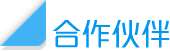
<style>
.page{position:relative;width:170px;height:51px;background:#ffffff}
.page>*{position:absolute;margin:0}
.t1{font:28.6px "MFLangQian_Noncommercial-Light";letter-spacing:0.01em;color:#0298ef;font-weight:bold}
</style>
<div class="page">
<p class="t1" style="left:53px;top:20px;width:117px;height:28px">合作伙伴</p>
</div>
